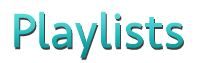
<style>
.page{position:relative;width:197px;height:63px;background:#ffffff}
.page>*{position:absolute;margin:0}
.t1{font:50px "Seravek"}
</style>
<div class="page">
<p class="t1" style="left:14px;top:11px;width:169px;height:47px">Playlists</p>
</div>
